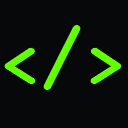
<style>
.page{position:relative;width:128px;height:128px;background:#070809}
.page>*{position:absolute;margin:0}
.t1{font:18px "Chalkboard";color:#61ff00;scale:1.17 1}
</style>
<div class="page">
<p class="t1" style="left:4px;top:25px;width:118px;height:65px">&lt;/&gt;</p>
</div>
